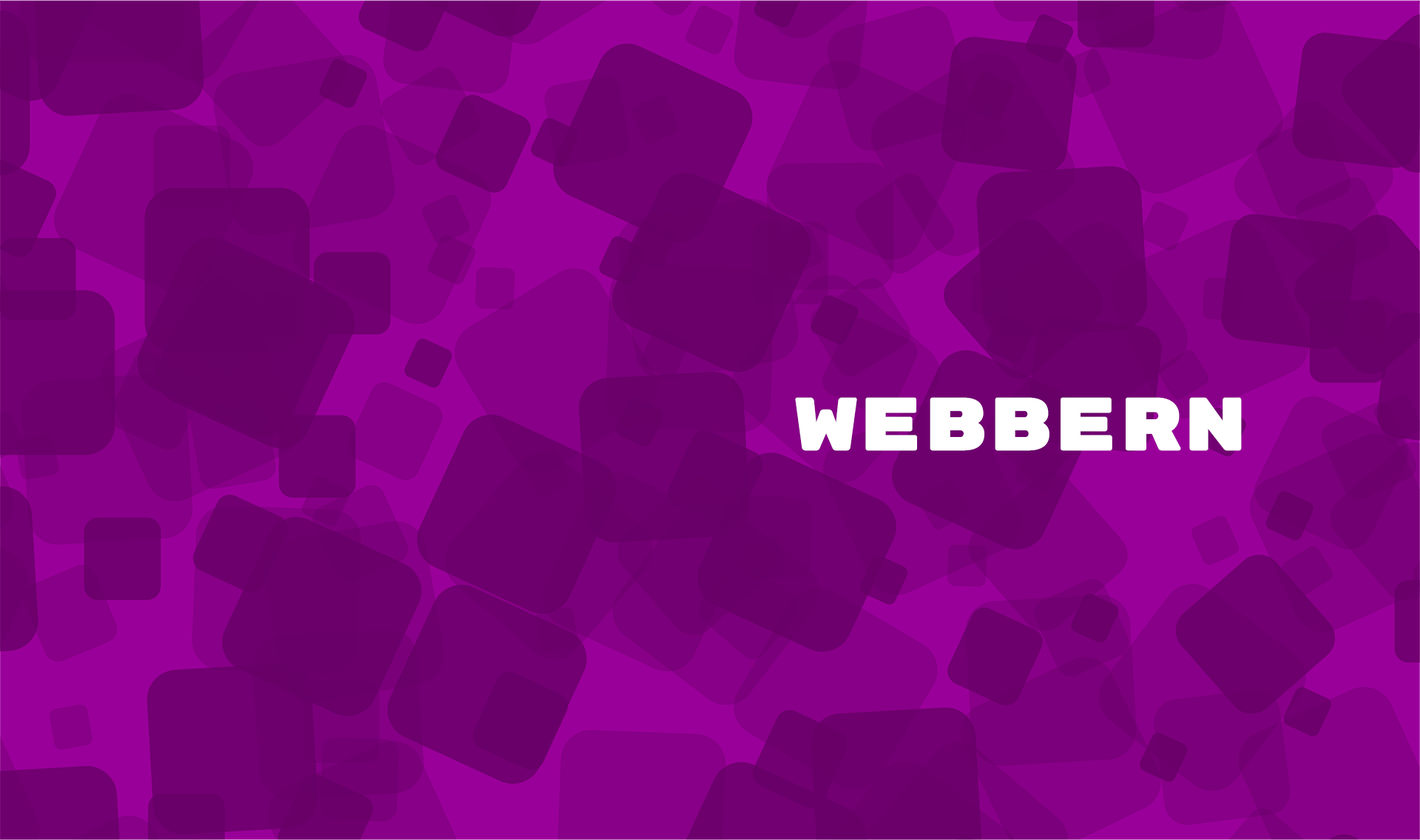
<style>
.page{position:relative;width:1420px;height:840px}
.page>*{position:absolute;margin:0}
.t1{font:74.6px "RubikMonoOne-Regular";color:#ffffff;font-weight:bold}
</style>
<div class="page">
<p class="t1" style="left:795px;top:397px;width:446px;height:54px">WEBBERN</p>
</div>
